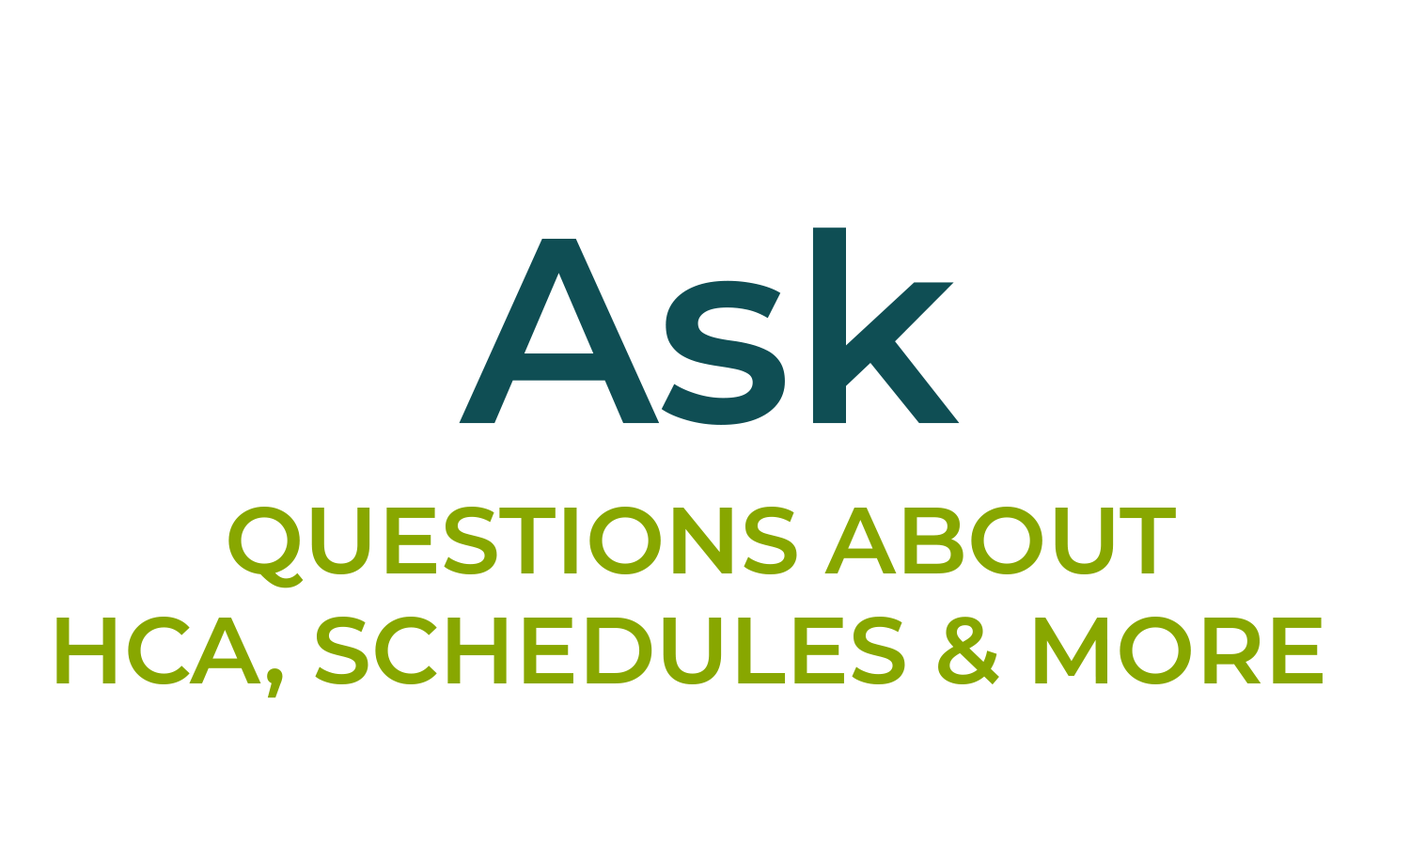
<style>
.page{position:relative;width:1410px;height:846px;background:#ffffff}
.page>*{position:absolute;margin:0}
.t1{font:263.1px "Montserrat-SemiBold";color:#0f4e54}
.t2{font:94px/0.2px "Montserrat-SemiBold";color:#88a700;text-transform:uppercase}
</style>
<div class="page">
<p class="t1" style="left:459px;top:227px;width:501px;height:198px">Ask</p>
<p class="t2" style="left:56px;top:507px;width:1266px;height:191px;text-align:center">Questions about<br>HCA, schedules &amp; more</p>
</div>
